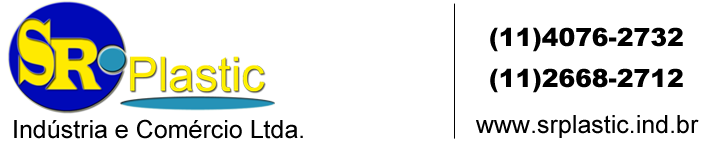
<style>
.page{position:relative;width:720px;height:142px;background:#ffffff}
.page>*{position:absolute;margin:0}
.t1{font:25px "Arial-Black";color:#000000}
.t2{font:25px "ArialMT";color:#000000}
</style>
<div class="page">
<p class="t1" style="left:490px;top:27px;width:193px;height:25px">(11)4076-2732</p>
<p class="t1" style="left:490px;top:68px;width:193px;height:25px">(11)2668-2712</p>
<p class="t2" style="left:14px;top:119px;width:289px;height:20px">Indústria e Comércio Ltda.</p>
<p class="t2" style="left:476px;top:115px;width:223px;height:23px">www.srplastic.ind.br</p>
</div>
